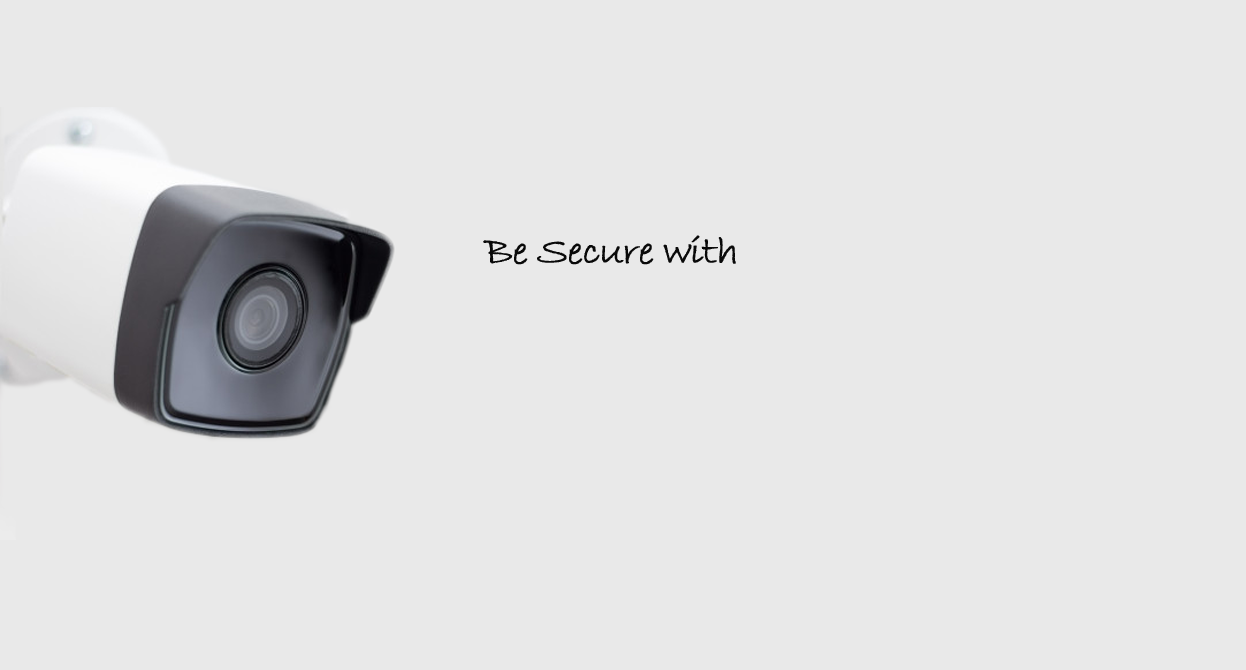
<style>
.page{position:relative;width:1246px;height:670px;background:#e9e9e9}
.page>*{position:absolute;margin:0}
.t1{font:40px "BradleyHandITC";letter-spacing:-0.04em;color:#090909;font-weight:bold;scale:1.07 1}
</style>
<div class="page">
<p class="t1" style="left:483px;top:235px;width:253px;height:30px">Be Secure with</p>
</div>
